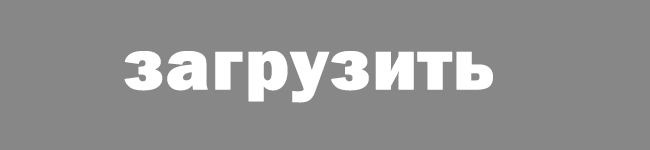
<style>
.page{position:relative;width:650px;height:150px;background:#878787}
.page>*{position:absolute;margin:0}
.t1{font:75px "FranklinGothic-Heavy";color:#ffffff;font-weight:bold}
</style>
<div class="page">
<p class="t1" style="left:124px;top:51px;width:369px;height:52px">загрузить</p>
</div>
